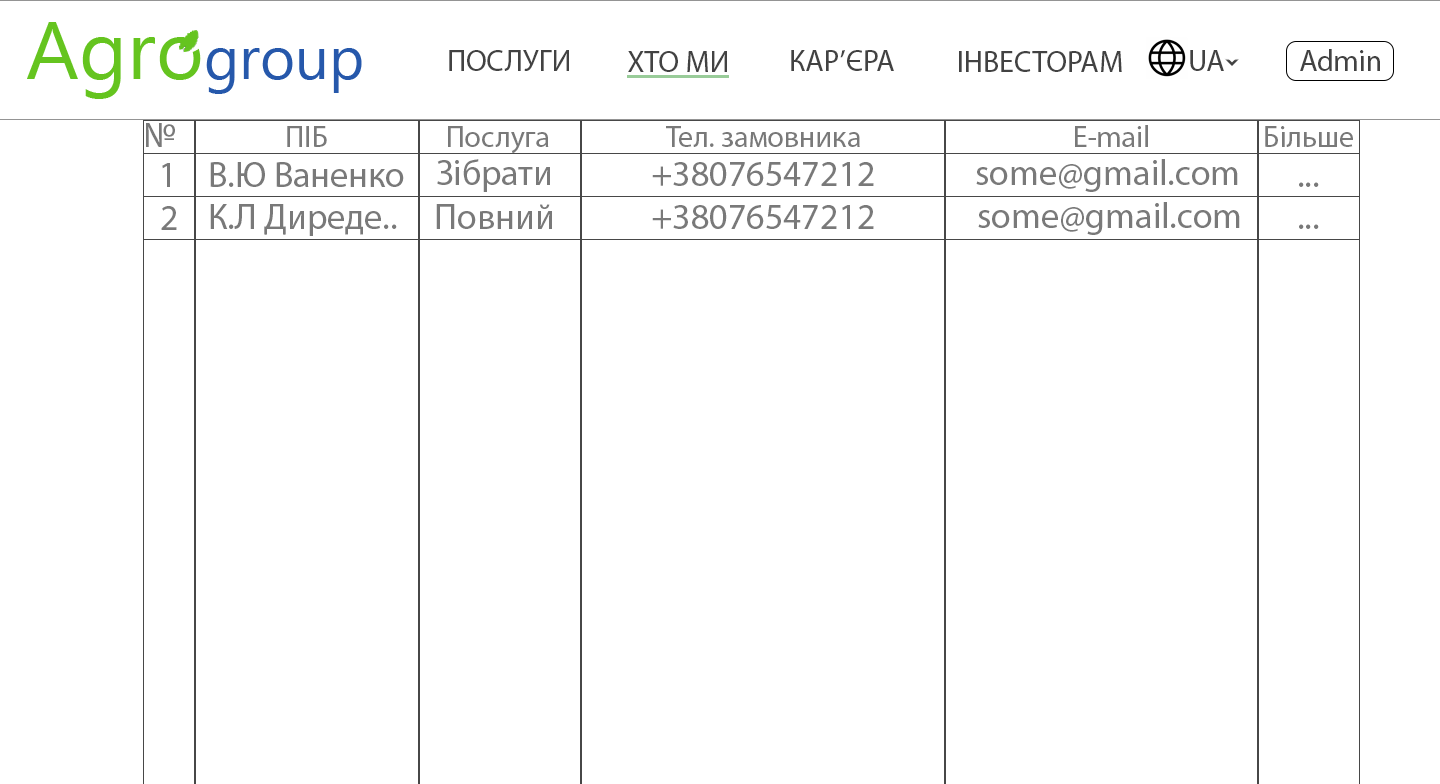
<style>
.page{position:relative;width:1440px;height:784px;background:#ffffff}
.page>*{position:absolute;margin:0}
.t1{font:30px "MyriadPro-Regular";color:#424242}
.t2{font:36px "MyriadPro-Regular";color:#797979}
.t3{font:30px "MyriadPro-Regular";color:#797979}
</style>
<div class="page">
<p class="t1" style="left:449px;top:50px;width:120px;height:21px">ПОСЛУГИ</p>
<p class="t1" style="left:628px;top:51px;width:99px;height:21px">ХТО МИ</p>
<p class="t1" style="left:791px;top:50px;width:103px;height:21px">КАР’ЄРА</p>
<p class="t1" style="left:959px;top:51px;width:163px;height:21px">ІНВЕСТОРАМ</p>
<p class="t1" style="left:1190px;top:50px;width:34px;height:21px">UA</p>
<p class="t1" style="left:1300px;top:49px;width:80px;height:22px">Admin</p>
<p class="t2" style="left:146px;top:123px;width:29px;height:24px">№</p>
<p class="t3" style="left:287px;top:126px;width:40px;height:21px">ПІБ</p>
<p class="t3" style="left:448px;top:126px;width:101px;height:28px">Послуга</p>
<p class="t3" style="left:666px;top:126px;width:194px;height:21px">Тел. замовника</p>
<p class="t3" style="left:1075px;top:125px;width:73px;height:22px">E-mail</p>
<p class="t3" style="left:1265px;top:126px;width:88px;height:21px">Більше</p>
<p class="t2" style="left:437px;top:159px;width:113px;height:33px">Зібрати</p>
<p class="t2" style="left:976px;top:159px;width:262px;height:33px">some@gmail.com</p>
<p class="t2" style="left:162px;top:163px;width:8px;height:24px">1</p>
<p class="t2" style="left:210px;top:162px;width:194px;height:25px">В.Ю Ваненко</p>
<p class="t2" style="left:652px;top:162px;width:222px;height:24px">+38076547212</p>
<p class="t2" style="left:1299px;top:182px;width:20px;height:5px">...</p>
<p class="t2" style="left:161px;top:206px;width:16px;height:24px">2</p>
<p class="t2" style="left:210px;top:204px;width:187px;height:32px">К.Л Диреде..</p>
<p class="t2" style="left:436px;top:204px;width:116px;height:25px">Повний</p>
<p class="t2" style="left:652px;top:205px;width:222px;height:24px">+38076547212</p>
<p class="t2" style="left:978px;top:202px;width:262px;height:33px">some@gmail.com</p>
<p class="t2" style="left:1299px;top:224px;width:20px;height:5px">...</p>
</div>
